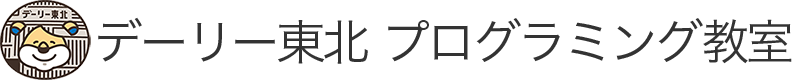
<style>
.page{position:relative;width:800px;height:80px;background:#ffffff}
.page>*{position:absolute;margin:0}
.t1{font:48px "HiraKakuPro-W3";letter-spacing:-0.05em;color:#333333}
</style>
<div class="page">
<p class="t1" style="left:98px;top:17px;width:694px;height:47px">デーリー東北 プログラミング教室</p>
</div>
